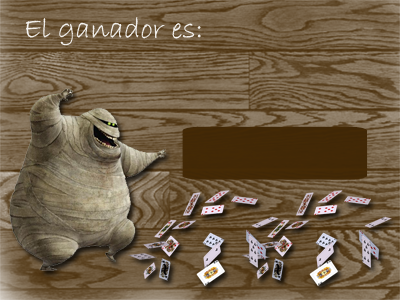
<style>
.page{position:relative;width:400px;height:300px}
.page>*{position:absolute;margin:0}
.t1{font:30px "BradleyHandITC";color:#f6f5f3}
</style>
<div class="page">
<p class="t1" style="left:25px;top:17px;width:176px;height:29px">El ganador es:</p>
</div>
